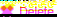
<style>
.page{position:relative;width:57px;height:17px}
.page>*{position:absolute;margin:0}
.t1{font:12px "ArialMT"}
</style>
<div class="page">
<p class="t1" style="left:20px;top:4px;width:34px;height:9px">Delete</p>
</div>
